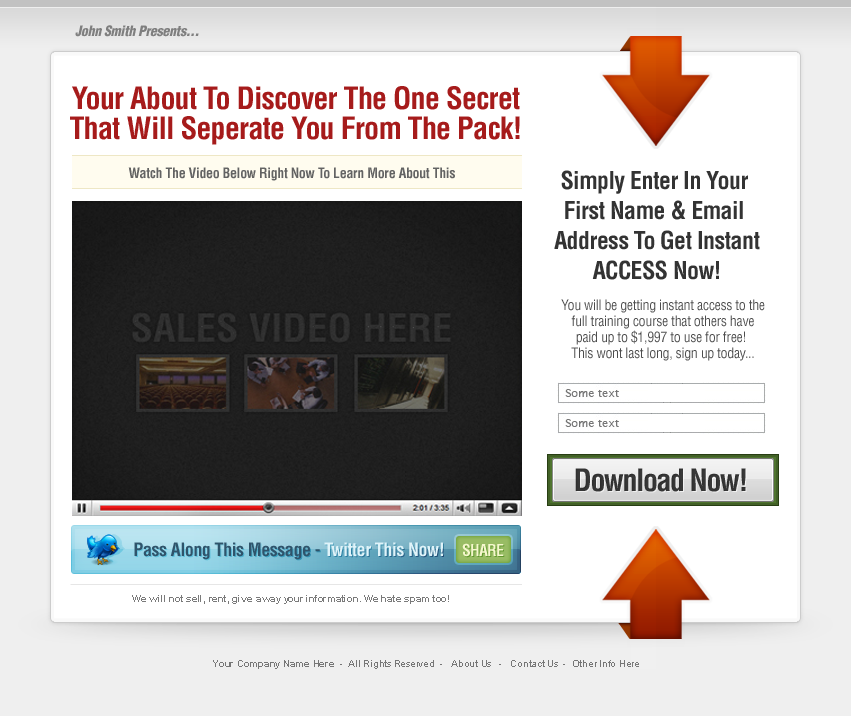
<style>
.page{position:relative;width:851px;height:716px;background:#ffffff}
.page>*{position:absolute;margin:0}
.t1{font:14px "Helvetica-Condensed-BlackObl";letter-spacing:-0.025em;color:#7f7f7f}
.t2{font:30px/30px "Helvetica-Condensed-Bold";letter-spacing:-0.025em;color:#a61b1b}
.t3{font:14px "Helvetica-Condensed-Bold";letter-spacing:-0.025em;color:#636363}
.t4{font:24px/30px "Helvetica-Condensed-Bold";letter-spacing:-0.025em;color:#333333}
.t5{font:14px/16px "Helvetica-Condensed";letter-spacing:-0.025em;color:#4d4d4d}
.t6{font:30px "Helvetica-Condensed-Bold";letter-spacing:-0.05em;color:#353535}
.t7{font:18px "Helvetica-Condensed-Bold";letter-spacing:-0.025em;color:#2f546b}
.t8{font:18px "Helvetica-Condensed-Bold";letter-spacing:-0.025em;color:#dff3f9}
.t9{font:16px "Helvetica-Condensed-Bold";letter-spacing:-0.05em;color:#f5f7cd}
.t10{font:10px "Arial-BoldMT";letter-spacing:-0.025em;color:#7a7a7a}
.t11{font:10px "ArialMT";letter-spacing:-0.025em;color:#767676}
.t12{font:10px "Arial-BoldMT";letter-spacing:-0.025em;color:#767676}
</style>
<div class="page">
<p class="t1" style="left:75px;top:25px;width:124px;height:12px">John Smith Presents...</p>
<p class="t2" style="left:70px;top:86px;width:450px;height:59px;text-align:center">Your About To Discover The One Secret<br>That Will Seperate You From The Pack!</p>
<p class="t3" style="left:128px;top:167px;width:327px;height:14px">Watch The Video Below Right Now To Learn More About This</p>
<p class="t4" style="left:554px;top:170px;width:206px;height:110px;text-align:center">Simply Enter In Your <br>First Name &amp; Email <br>Address To Get Instant<br>ACCESS Now!</p>
<p class="t5" style="left:561px;top:299px;width:204px;height:62px;text-align:center">You will be getting instant access to the<br>full training course that others have<br>paid up to $1,997 to use for free! <br>This wont last long, sign up today...</p>
<p class="t6" style="left:575px;top:468px;width:171px;height:24px">Download Now!</p>
<p class="t7" style="left:134px;top:542px;width:309px;height:18px">Pass Along This Message -<span class="t8"> Twitter This Now!</span></p>
<p class="t9" style="left:462px;top:543px;width:42px;height:14px">SHARE</p>
<p class="t10" style="left:132px;top:595px;width:317px;height:9px">We will not sell, rent, give away your information. We hate spam too!</p>
<p class="t11" style="left:213px;top:660px;width:426px;height:9px"><span class="t12">Your Company Name Here</span>  -  All Rights Reserved  -   About Us   -   Contact Us  -  Other Info Here</p>
</div>
